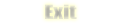
<style>
.page{position:relative;width:128px;height:24px;background:#ffffff}
.page>*{position:absolute;margin:0}
.t1{font:18px "Impact";scale:1.25 1}
</style>
<div class="page">
<p class="t1" style="left:45px;top:4px;width:32px;height:15px">Exit</p>
</div>
